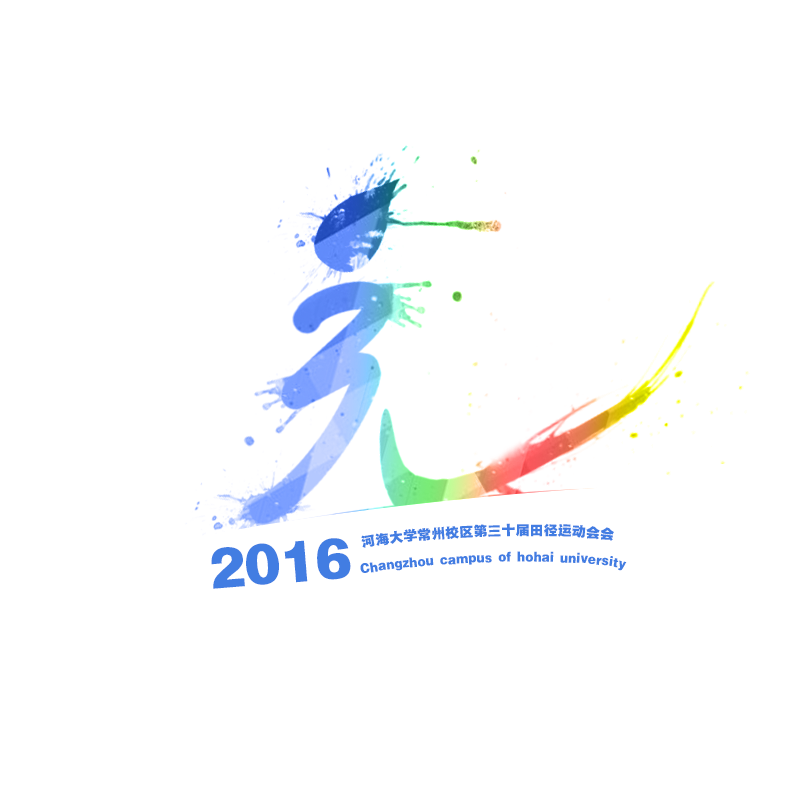
<style>
.page{position:relative;width:800px;height:800px;background:#ffffff}
.page>*{position:absolute;margin:0}
.t1{font:14px "FZYDTHJW--GB1-0";color:#427de2}
.t2{font:48px "FZYDTHJW--GB1-0";color:#427de2}
.t3{font:12px "FZYDTHJW--GB1-0";color:#427de2}
</style>
<div class="page">
<p class="t1" style="left:361px;top:523px;width:253px;height:25px">河海大学常州校区第三十届田径运动会会</p>
<p class="t2" style="left:211px;top:538px;width:140px;height:51px;rotate:-5deg">2016</p>
<p class="t3" style="left:360px;top:551px;width:267px;height:22px">Changzhou campus of hohai university</p>
</div>
